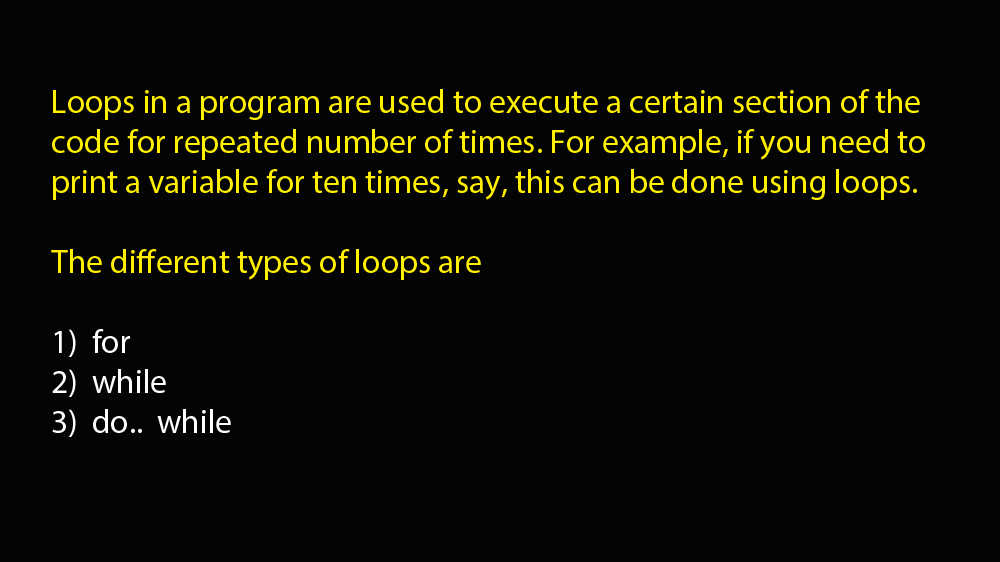
<style>
.page{position:relative;width:1000px;height:562px;background:#050404}
.page>*{position:absolute;margin:0}
.t1{font:33.3px "MyriadPro-Regular";color:#fff000}
.t2{font:33.3px "MyriadPro-Regular";color:#ffffff}
</style>
<div class="page">
<p class="t1" style="left:51px;top:89px;width:874px;height:348px">Loops in a program are used to execute a certain section of the code for repeated number of times. For example, if you need to print a variable for ten times, say, this can be done using loops.<br><br>The different types of loops are <br><span class="t2"><br>1)  for <br>2)  while <br>3)  do..  while</span></p>
</div>
